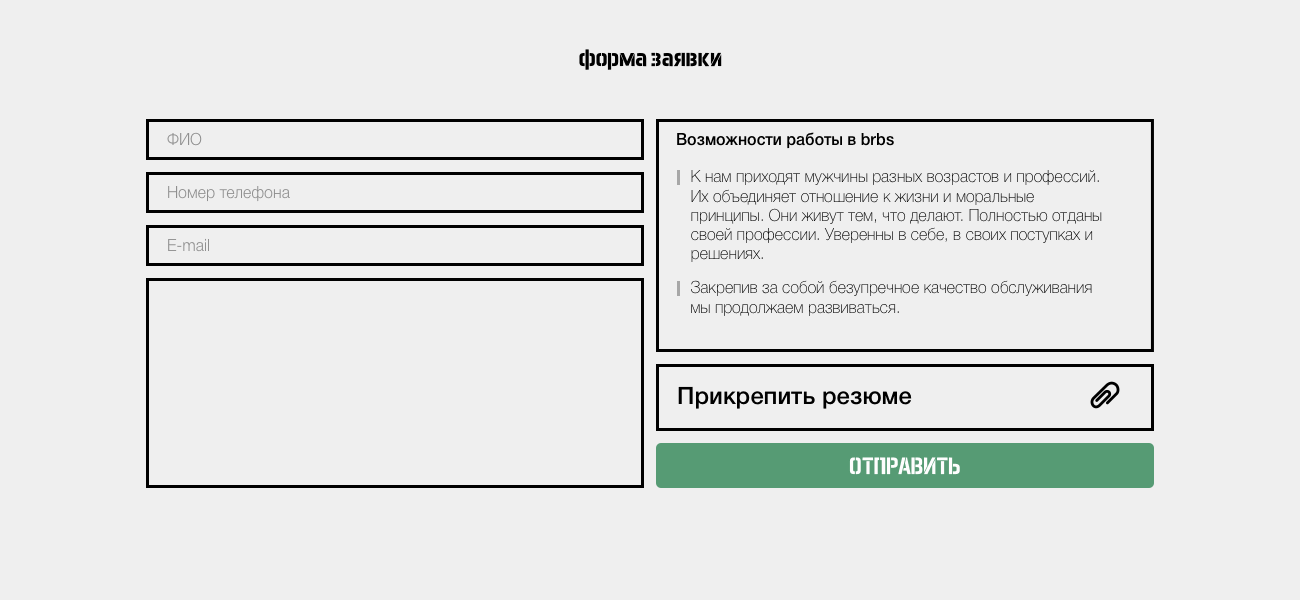
<style>
.page{position:relative;width:1300px;height:600px;background:#efefef}
.page>*{position:absolute;margin:0}
.t1{font:24px "AeroMaticsStencilBold";color:#000000}
.t2{font:16px "HelveticaNeueCyr-Light";color:#8f8f8f}
.t3{font:16px "HelveticaNeueCyr-Medium";color:#000000}
.t4{font:16px "HelveticaNeueCyr-Thin";color:#000000}
.t5{font:16px "HelveticaNeueCyr-Thin"}
.t6{font:24px "HelveticaNeueCyr-Medium";color:#000000}
.t7{font:24px "AeroMaticsStencilBold";color:#fefefe;text-transform:uppercase}
</style>
<div class="page">
<p class="t1" style="left:579px;top:49px;width:143px;height:21px">форма заявки</p>
<p class="t2" style="left:167px;top:132px;width:35px;height:14px">ФИО</p>
<p class="t3" style="left:677px;top:132px;width:217px;height:17px">Возможности работы в brbs</p>
<p class="t4" style="left:691px;top:170px;width:411px;height:92px">К нам приходят мужчины разных возрастов и профессий. Их объединяет отношение к жизни и моральные принципы. Они живут тем, что делают. Полностью отданы своей профессии. Уверенны в себе, в своих поступках и решениях.</p>
<p class="t2" style="left:168px;top:186px;width:122px;height:16px">Номер телефона</p>
<p class="t2" style="left:168px;top:238px;width:41px;height:14px">Е-mail</p>
<p class="t5" style="left:691px;top:280px;width:401px;height:36px">Закрепив за собой безупречное качество обслуживания мы продолжаем развиваться.</p>
<p class="t6" style="left:678px;top:386px;width:234px;height:23px">Прикрепить резюме</p>
<p class="t7" style="left:849px;top:457px;width:111px;height:18px">отправиты</p>
</div>
